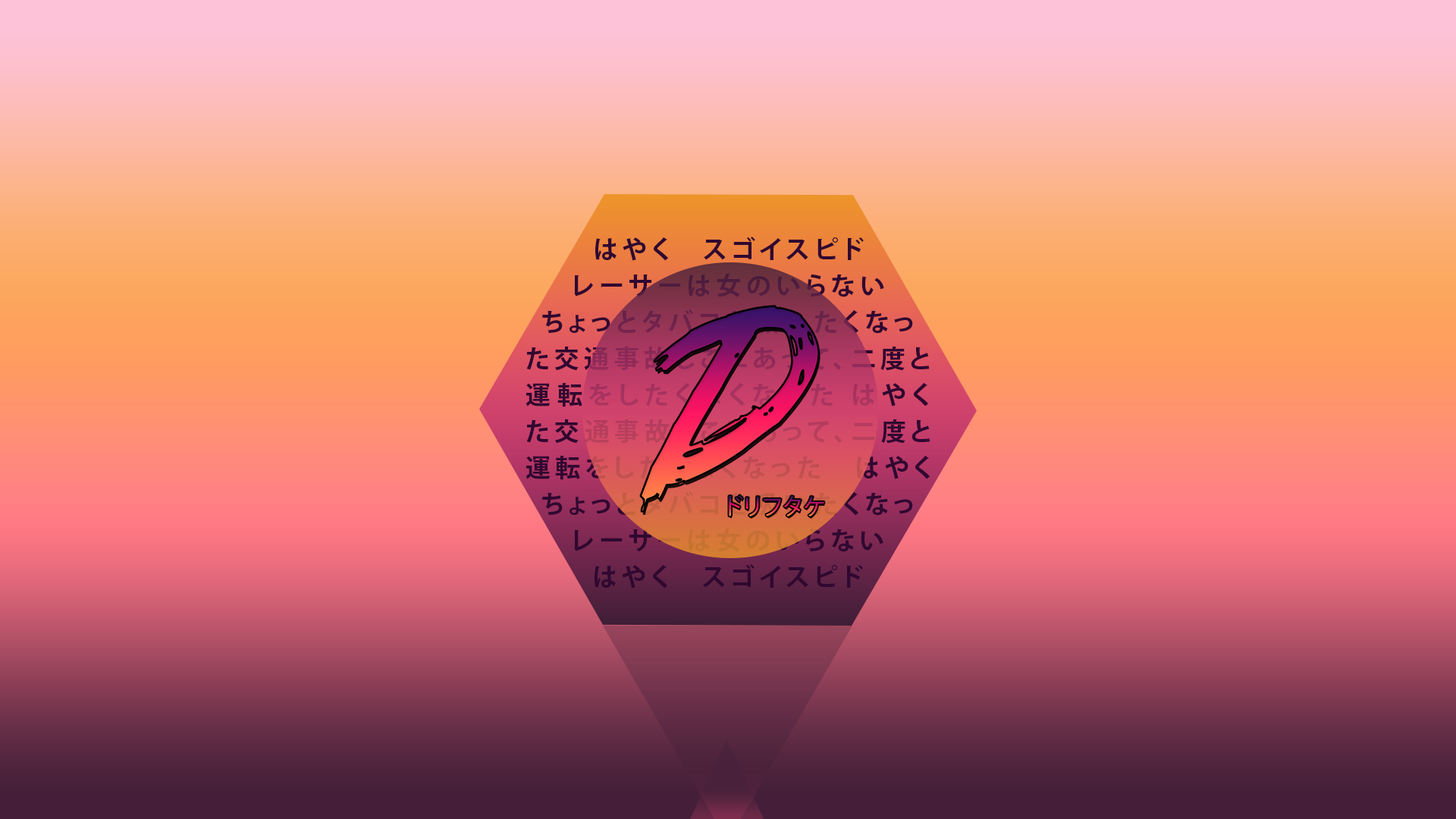
<style>
.page{position:relative;width:1456px;height:819px}
.page>*{position:absolute;margin:0}
.t1{font:25px/36.4px "KozGoPr6N-Bold";letter-spacing:0.2em}
.t2{font:25px/44.7px "KozGoPr6N-Bold";letter-spacing:0.2em}
.t3{font:25px/36.4px "KozGoPr6N-Bold";letter-spacing:0.25em}
.t4{font:22.7px "KozGoPr6N-Regular"}
</style>
<div class="page">
<p class="t1" style="left:526px;top:237px;width:404px;height:351px;text-align:center"><span class="t2">はやく　スゴイスピド<br></span>レーサーは女のいらない<br>ちょっとタバコを吸いたくなっ<br>た交通事故じこにあって、二度と<span class="t3">運転をしたくなくなった はやく<br></span>た交通事故じこにあって、二度と<br>運転をしたくなくなった　はやく <br>ちょっとタバコを吸いたくなっ<br>レーサーは女のいらない<br>はやく　スゴイスピド</p>
<p class="t4" style="left:729px;top:495px;width:95px;height:21px">ドリフタケ</p>
</div>
